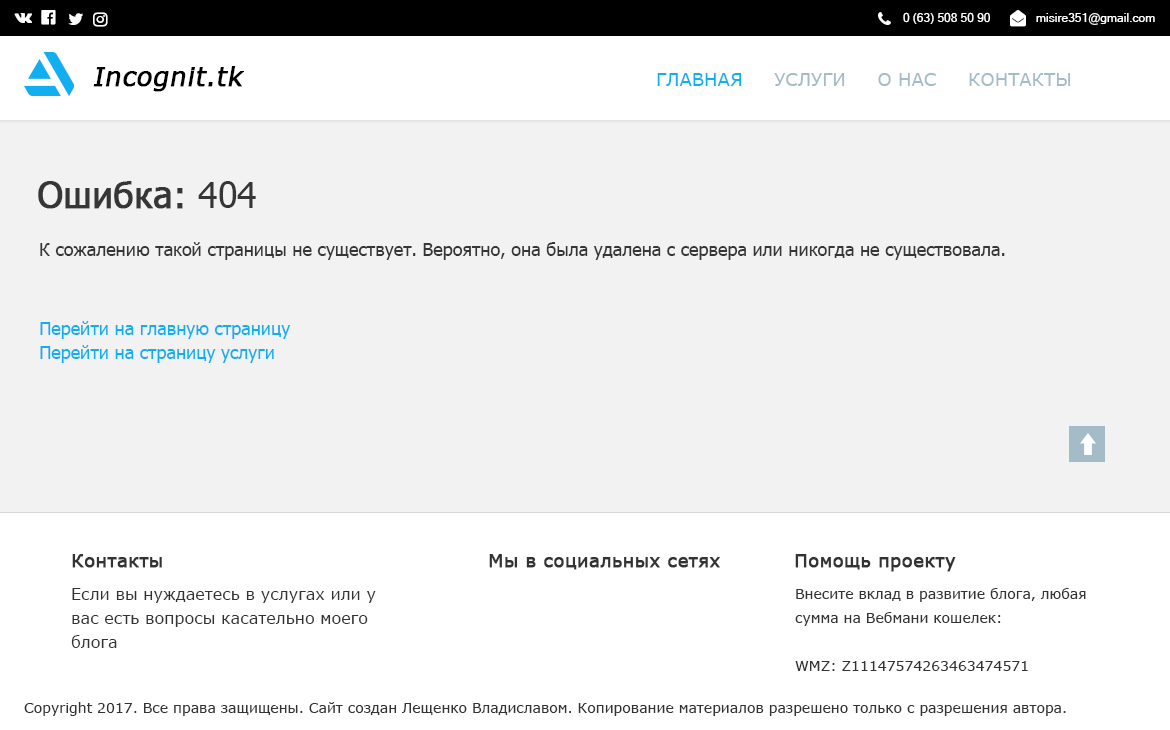
<style>
.page{position:relative;width:1170px;height:730px;background:#f2f2f2}
.page>*{position:absolute;margin:0}
.t1{font:12px "MicrosoftSansSerif";color:#ffffff}
.t2{font:26px "MSReferenceSansSerif";color:#000000;font-weight:bold;font-style:italic}
.t3{font:18px "MSReferenceSansSerif";color:#a3bcc7;text-transform:uppercase}
.t4{font:18px "MSReferenceSansSerif";color:#13aeef;text-transform:uppercase}
.t5{font:36px "Tahoma";color:#363636;font-weight:bold}
.t6{font:36px "Tahoma";color:#363636}
.t7{font:18px "Tahoma";color:#363636}
.t8{font:18px/24px "Tahoma";color:#13aeef}
.t9{font:18px "MSReferenceSansSerif";color:#333333;font-weight:bold}
.t10{font:16px/24px "MSReferenceSansSerif";color:#333333}
.t11{font:14px/24px "MSReferenceSansSerif";color:#333333}
.t12{font:14px "MSReferenceSansSerif";color:#333333}
</style>
<div class="page">
<p class="t1" style="left:903px;top:12px;width:87px;height:12px">0 (63) 508 50 90</p>
<p class="t1" style="left:1036px;top:13px;width:119px;height:12px">misire351@gmail.com</p>
<p class="t2" style="left:93px;top:66px;width:151px;height:26px">Incognit.tk</p>
<p class="t3" style="left:657px;top:73px;width:414px;height:13px"><span class="t4">Главная     </span>Услуги     О нас     Контакты</p>
<p class="t5" style="left:38px;top:181px;width:218px;height:28px">Ошибка:<span class="t6"> 404</span></p>
<p class="t7" style="left:40px;top:242px;width:965px;height:18px">К сожалению такой страницы не существует. Вероятно, она была удалена с сервера или никогда не существовала.</p>
<p class="t8" style="left:40px;top:321px;width:251px;height:42px">Перейти на главную страницу<br>Перейти на страницу услуги</p>
<p class="t9" style="left:72px;top:554px;width:90px;height:14px">Контакты</p>
<p class="t9" style="left:489px;top:554px;width:231px;height:16px">Мы в социальных сетях</p>
<p class="t9" style="left:795px;top:554px;width:161px;height:18px">Помощь проекту</p>
<p class="t10" style="left:71px;top:588px;width:305px;height:60px">Если вы нуждаетесь в услугах или у вас есть вопросы касательно моего блога</p>
<p class="t11" style="left:795px;top:588px;width:291px;height:83px">Внесите вклад в развитие блога, любая сумма на Вебмани кошелек:<br><br>WMZ: Z11147574263463474571</p>
<p class="t12" style="left:24px;top:702px;width:1042px;height:14px">Copyright 2017. Все права защищены. Сайт создан Лещенко Владиславом. Копирование материалов разрешено только с разрешения автора.</p>
</div>
